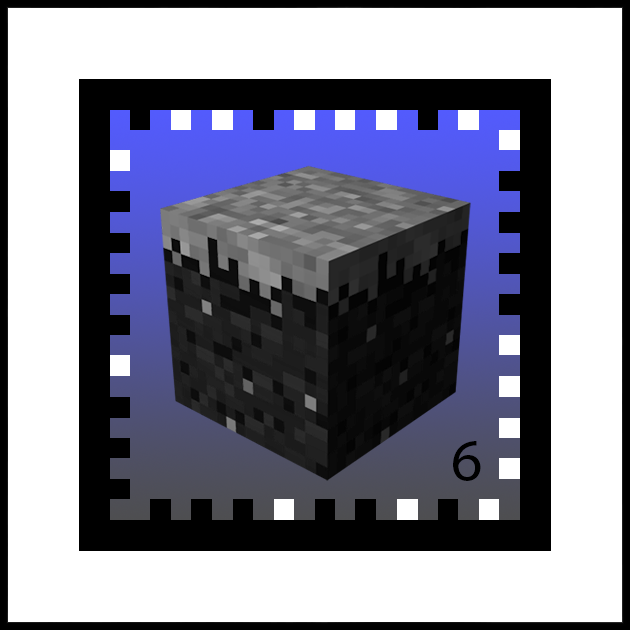
<style>
.page{position:relative;width:630px;height:630px;background:#ffffff}
.page>*{position:absolute;margin:0}
.t1{font:61.1px "MyriadPro-Regular";color:#000000;font-variant:small-caps}
</style>
<div class="page">
<p class="t1" style="left:453px;top:441px;width:28px;height:40px">6</p>
</div>
